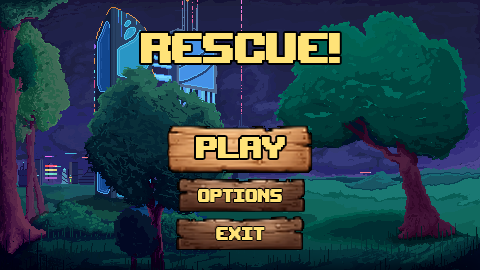
<style>
.page{position:relative;width:480px;height:270px}
.page>*{position:absolute;margin:0}
.t1{font:58.5px "UpheavalTT-BRK-";letter-spacing:-0.02em;color:#ffe478;scale:0.93 1}
.t2{font:40.7px "UpheavalTT-BRK-";letter-spacing:-0.02em;color:#ffe478;scale:0.93 1}
.t3{font:25.2px "UpheavalTT-BRK-";letter-spacing:-0.02em;color:#ffe478;scale:0.85 1}
.t4{font:25.2px "UpheavalTT-BRK-";color:#ffe478;scale:0.85 1}
</style>
<div class="page">
<p class="t1" style="left:141px;top:33px;width:199px;height:30px">RESCUE!</p>
<p class="t2" style="left:196px;top:137px;width:89px;height:21px">PLAY</p>
<p class="t3" style="left:198px;top:189px;width:84px;height:13px">OPTIONS</p>
<p class="t4" style="left:216px;top:227px;width:49px;height:13px">EXIT</p>
</div>
